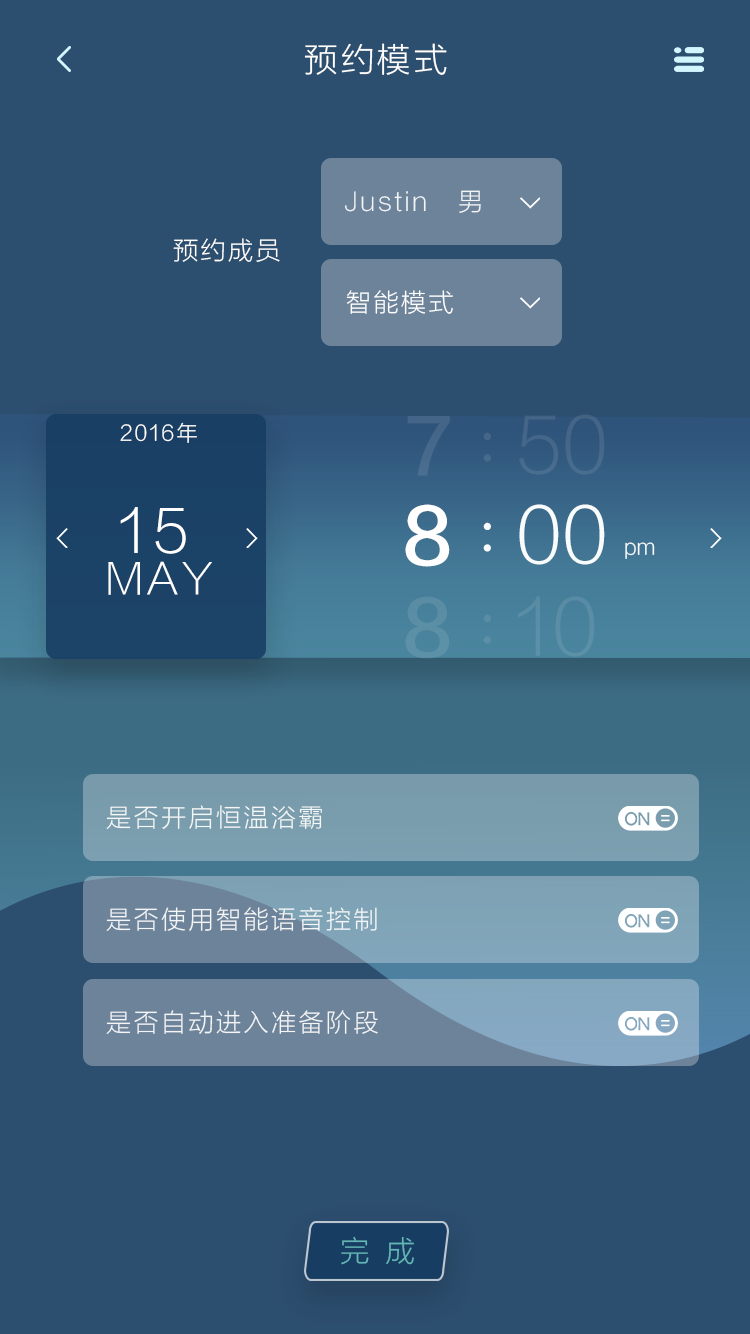
<style>
.page{position:relative;width:750px;height:1334px;background:#2c4e6f}
.page>*{position:absolute;margin:0}
.t1{font:33.3px "FZLTXHJW--GB1-0";letter-spacing:0.1em;color:#ffffff}
.t2{font:25px "FZLTXHJW--GB1-0";letter-spacing:0.1em;color:#fefefe}
.t3{font:25px "FZLTXHJW--GB1-0";letter-spacing:0.1em;color:#ffffff}
.t4{font:75px "FZLTXHJW--GB1-0";color:#446789}
.t5{font:20.8px "FZLTXHJW--GB1-0";letter-spacing:0.1em;color:#ffffff}
.t6{font:75px "FZLTZHJW--GB1-0";letter-spacing:0.1em;color:#446588}
.t7{font:58.3px "STZhongsong";color:#446689}
.t8{font:58.3px "FZLTXHJW--GB1-0";letter-spacing:0.1em;color:#ffffff}
.t9{font:75px "FZLTZHJW--GB1-0";letter-spacing:0.1em;color:#ffffff}
.t10{font:75px "FZLTXHJW--GB1-0";color:#f9fcfc}
.t11{font:58.3px "STZhongsong";color:#f9fcfc}
.t12{font:20.8px "FZLTXHJW--GB1-0";color:#f9fcfc}
.t13{font:41.7px "FZLTXHJW--GB1-0";letter-spacing:0.1em;color:#ffffff}
.t14{font:75px "FZLTZHJW--GB1-0";letter-spacing:0.1em;color:#5b8fa6}
.t15{font:75px "FZLTXHJW--GB1-0";color:#5a8ea6}
.t16{font:58.3px "STZhongsong";color:#5a8ea6}
.t17{font:29.2px "FZLTXHJW--GB1-0";color:#63b7b6}
</style>
<div class="page">
<p class="t1" style="left:304px;top:43px;width:143px;height:32px">预约模式</p>
<p class="t2" style="left:344px;top:190px;width:137px;height:23px;opacity:0.9">Justin   男</p>
<p class="t3" style="left:173px;top:238px;width:107px;height:24px">预约成员</p>
<p class="t3" style="left:346px;top:290px;width:107px;height:25px">智能模式</p>
<p class="t4" style="left:519px;top:414px;width:86px;height:61px">50</p>
<p class="t5" style="left:120px;top:422px;width:77px;height:21px">2016年</p>
<p class="t6" style="left:407px;top:416px;width:43px;height:60px">7</p>
<p class="t7" style="left:483px;top:432px;width:8px;height:30px">:</p>
<p class="t8" style="left:120px;top:507px;width:66px;height:47px">15</p>
<p class="t9" style="left:405px;top:504px;width:45px;height:63px">8</p>
<p class="t10" style="left:519px;top:504px;width:86px;height:61px">00</p>
<p class="t11" style="left:483px;top:522px;width:8px;height:30px">:</p>
<p class="t12" style="left:625px;top:542px;width:30px;height:17px">pm</p>
<p class="t13" style="left:108px;top:561px;width:104px;height:34px">MAY</p>
<p class="t14" style="left:405px;top:596px;width:45px;height:63px">8</p>
<p class="t15" style="left:518px;top:596px;width:77px;height:61px">10</p>
<p class="t16" style="left:483px;top:614px;width:8px;height:30px">:</p>
<p class="t3" style="left:106px;top:805px;width:216px;height:24px;opacity:0.9">是否开启恒温浴霸</p>
<p class="t3" style="left:106px;top:907px;width:271px;height:25px;opacity:0.9">是否使用智能语音控制</p>
<p class="t3" style="left:106px;top:1010px;width:272px;height:24px;opacity:0.9">是否自动进入准备阶段</p>
<p class="t17" style="left:341px;top:1236px;width:73px;height:29px">完  成</p>
</div>
